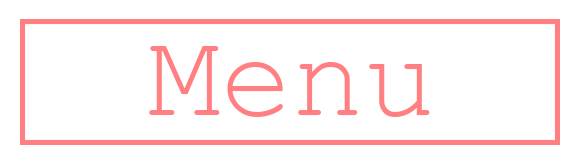
<style>
.page{position:relative;width:580px;height:163px;background:#ffffff}
.page>*{position:absolute;margin:0}
.t1{font:120px "CourierNewPSMT";color:#ff7f82}
</style>
<div class="page">
<p class="t1" style="left:149px;top:46px;width:281px;height:71px">Menu</p>
</div>
